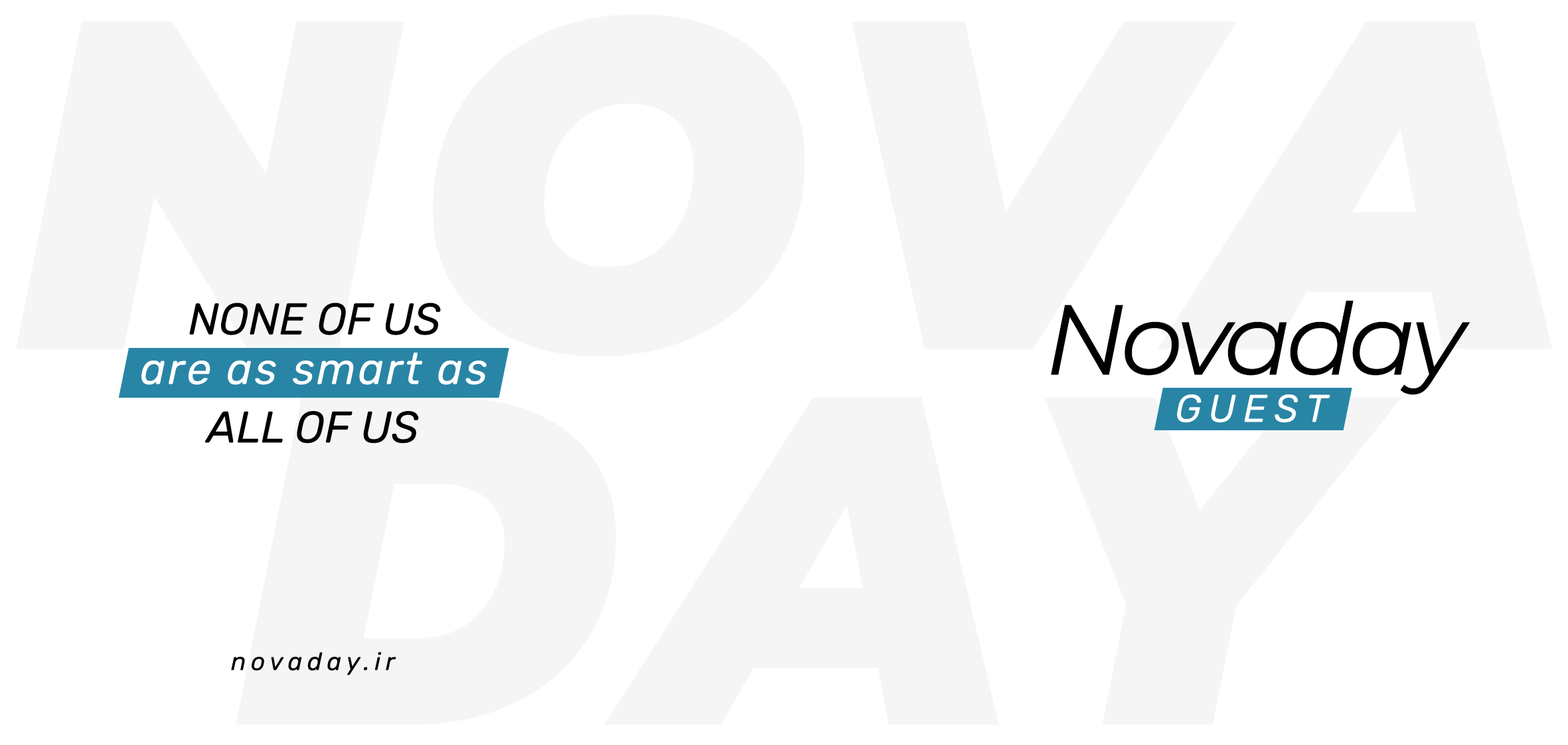
<style>
.page{position:relative;width:1568px;height:745px;background:#ffffff}
.page>*{position:absolute;margin:0}
.t1{font:44.3px "Rubik-Italic";color:#000000}
.t2{font:99.6px "Montserrat-Italic";letter-spacing:-0.05em;color:#000000}
.t3{font:44.3px "Rubik-Italic";letter-spacing:0.05em;color:#ffffff}
.t4{font:38.7px "Rubik-Italic";letter-spacing:0.2em;color:#ffffff}
.t5{font:24.9px "Rubik-Italic";letter-spacing:0.2em;color:#000000}
</style>
<div class="page">
<p class="t1" style="left:189px;top:303px;width:252px;height:32px">NONE OF US</p>
<p class="t2" style="left:1051px;top:300px;width:419px;height:95px">Novaday</p>
<p class="t3" style="left:141px;top:353px;width:346px;height:32px">are as smart as</p>
<p class="t4" style="left:1177px;top:394px;width:153px;height:29px">GUEST</p>
<p class="t1" style="left:205px;top:411px;width:214px;height:32px">ALL OF US</p>
<p class="t5" style="left:231px;top:652px;width:165px;height:23px">novaday.ir</p>
</div>
